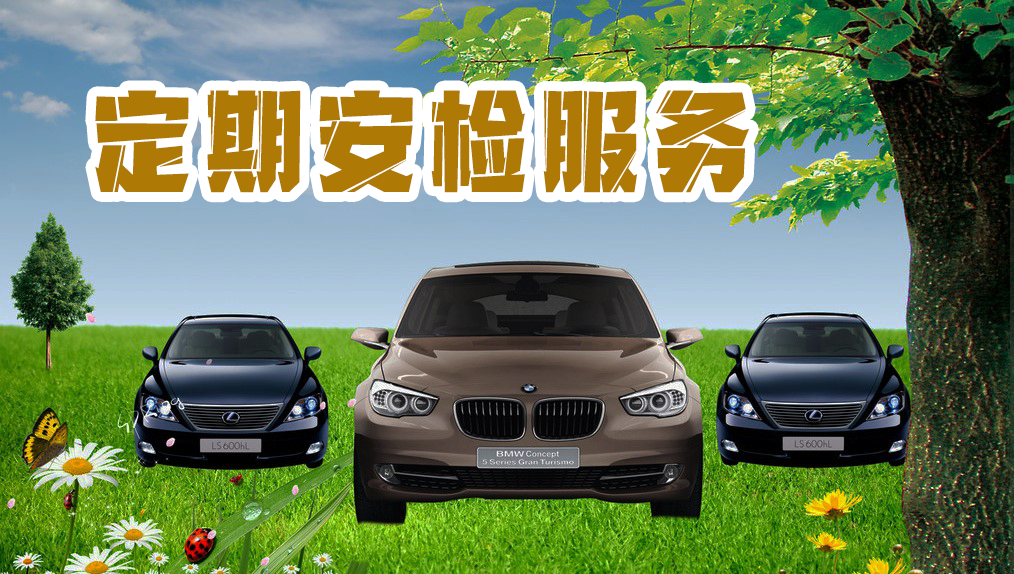
<style>
.page{position:relative;width:1014px;height:574px}
.page>*{position:absolute;margin:0}
.t1{font:103.7px "HYChaoJiZhanJiaW";letter-spacing:0.18em;color:#af7905;text-transform:uppercase;scale:0.92 1}
</style>
<div class="page">
<p class="t1" style="left:95px;top:90px;width:654px;height:103px">定期安检服务</p>
</div>
